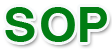
<style>
.page{position:relative;width:112px;height:52px;background:#ffffff}
.page>*{position:absolute;margin:0}
.t1{font:48.9px "Coolvetica";letter-spacing:0.1em;color:#017d13}
</style>
<div class="page">
<p class="t1" style="left:5px;top:7px;width:102px;height:35px">SOP</p>
</div>
